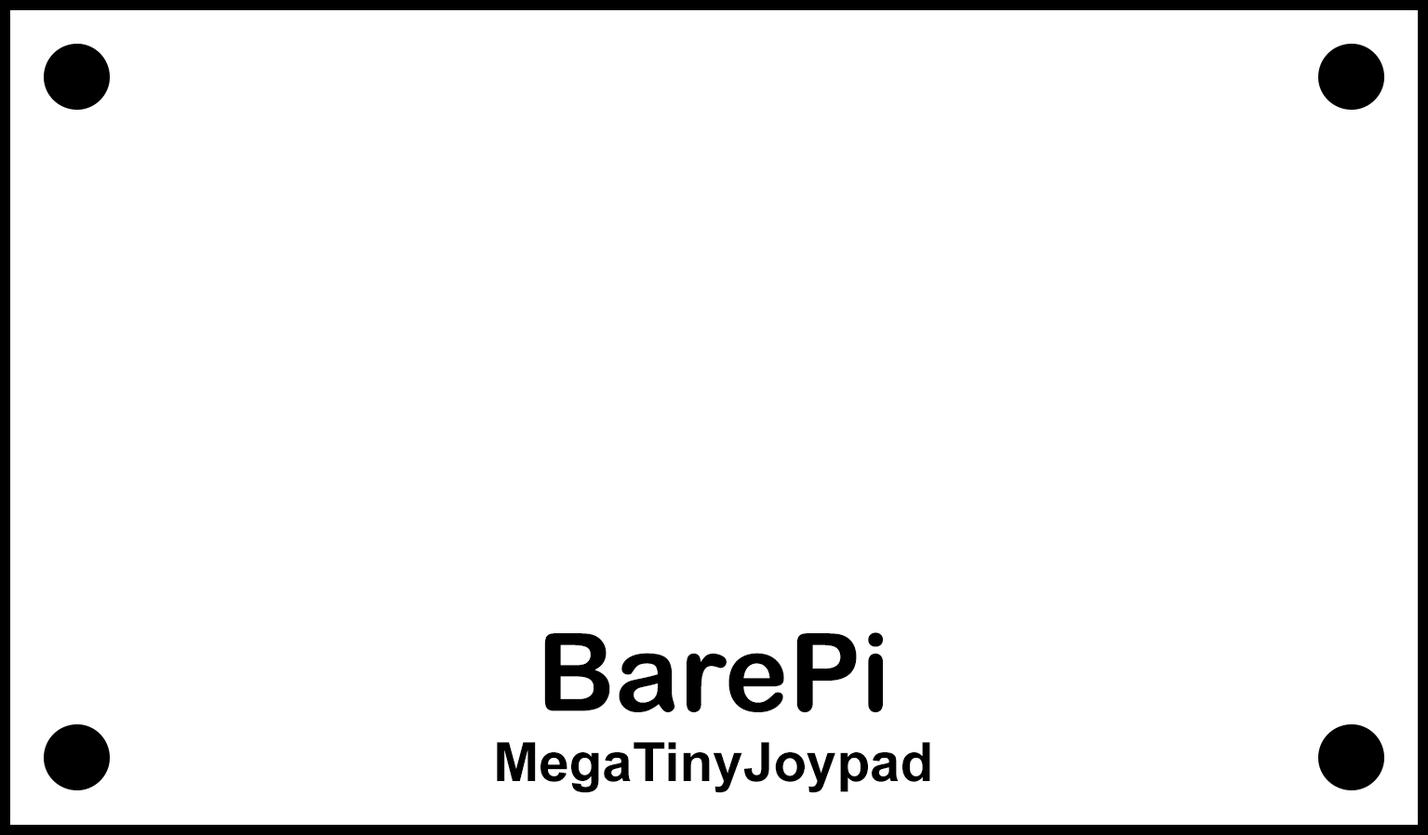
<style>
.page{position:relative;width:1428px;height:835px;background:#ffffff}
.page>*{position:absolute;margin:0}
.t1{font:108.2px "ArialRoundedMTBold";color:#000000}
.t2{font:54.3px "Arial-BoldMT";color:#000000}
</style>
<div class="page">
<p class="t1" style="left:544px;top:632px;width:339px;height:80px">BarePi</p>
<p class="t2" style="left:497px;top:742px;width:433px;height:51px">MegaTinyJoypad</p>
</div>
